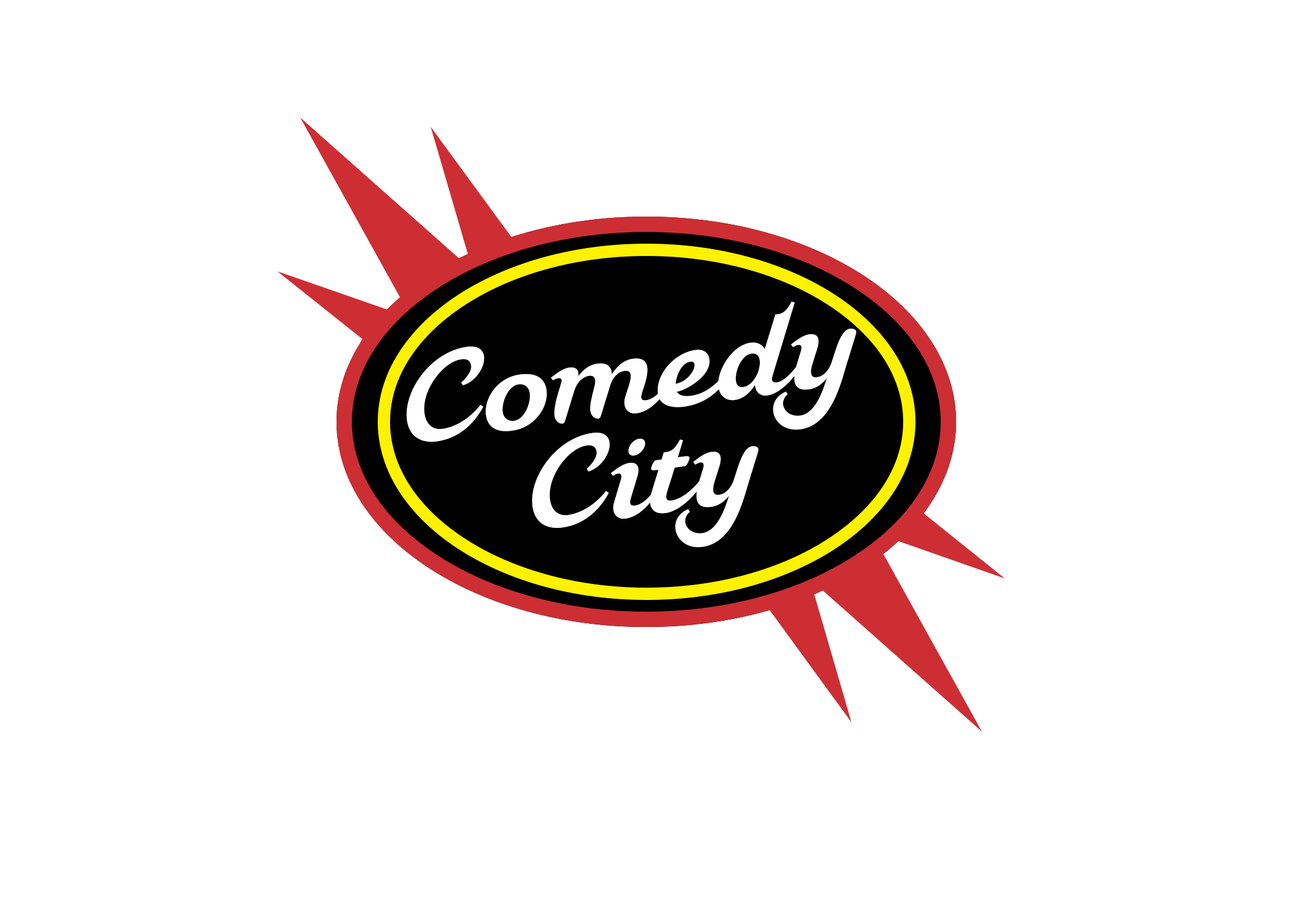
<style>
.page{position:relative;width:1292px;height:923px;background:#ffffff}
.page>*{position:absolute;margin:0}
.t1{font:123.1px "Mahalia";letter-spacing:-0.01em;color:#ffffff}
</style>
<div class="page">
<p class="t1" style="left:406px;top:301px;width:450px;height:247px;rotate:-8deg">Comedy City</p>
</div>
